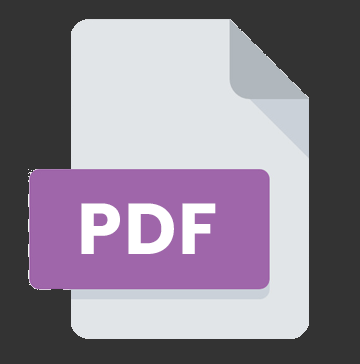
<style>
.page{position:relative;width:360px;height:364px;background:#333333}
.page>*{position:absolute;margin:0}
.t1{font:72px "Poppins-Bold";letter-spacing:0.025em;color:#ffffff}
</style>
<div class="page">
<p class="t1" style="left:81px;top:203px;width:135px;height:51px">PDF</p>
</div>
